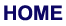
<style>
.page{position:relative;width:66px;height:26px;background:#ffffff}
.page>*{position:absolute;margin:0}
.t1{font:20px "Arial-BoldMT";color:#0d0664}
</style>
<div class="page">
<p class="t1" style="left:4px;top:5px;width:59px;height:16px">HOME</p>
</div>
